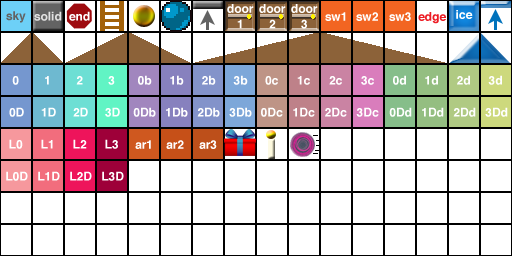
<style>
.page{position:relative;width:512px;height:256px;background:#ffffff}
.page>*{position:absolute;margin:0}
.t1{font:12px "Helvetica-Bold";color:#ffffff}
.t2{font:12px "Helvetica-Bold";color:#636363}
.t3{font:12px "Helvetica-Bold";color:#e1e1e1}
.t4{font:12px "Helvetica-Bold";color:#ed1c24}
</style>
<div class="page">
<p class="t1" style="left:227px;top:4px;width:27px;height:9px">door</p>
<p class="t1" style="left:259px;top:4px;width:27px;height:9px">door</p>
<p class="t1" style="left:291px;top:4px;width:27px;height:9px">door</p>
<p class="t2" style="left:6px;top:11px;width:20px;height:12px">sky</p>
<p class="t3" style="left:34px;top:11px;width:28px;height:10px">solid</p>
<p class="t1" style="left:69px;top:11px;width:21px;height:10px">end</p>
<p class="t1" style="left:325px;top:12px;width:21px;height:9px">sw1</p>
<p class="t1" style="left:356px;top:12px;width:22px;height:9px">sw2</p>
<p class="t1" style="left:389px;top:12px;width:22px;height:9px">sw3</p>
<p class="t4" style="left:418px;top:12px;width:28px;height:12px">edge</p>
<p class="t1" style="left:456px;top:10px;width:17px;height:9px">ice</p>
<p class="t1" style="left:237px;top:19px;width:5px;height:10px">1</p>
<p class="t1" style="left:269px;top:19px;width:7px;height:10px">2</p>
<p class="t1" style="left:301px;top:19px;width:6px;height:10px">3</p>
<p class="t1" style="left:12px;top:76px;width:7px;height:9px">0</p>
<p class="t1" style="left:45px;top:76px;width:4px;height:9px">1</p>
<p class="t1" style="left:76px;top:76px;width:7px;height:9px">2</p>
<p class="t1" style="left:108px;top:76px;width:7px;height:9px">3</p>
<p class="t1" style="left:138px;top:75px;width:14px;height:10px">0b</p>
<p class="t1" style="left:170px;top:75px;width:14px;height:10px">1b</p>
<p class="t1" style="left:202px;top:75px;width:14px;height:10px">2b</p>
<p class="t1" style="left:233px;top:75px;width:15px;height:10px">3b</p>
<p class="t1" style="left:265px;top:76px;width:13px;height:9px">0c</p>
<p class="t1" style="left:297px;top:76px;width:13px;height:9px">1c</p>
<p class="t1" style="left:329px;top:76px;width:13px;height:9px">2c</p>
<p class="t1" style="left:361px;top:76px;width:13px;height:9px">3c</p>
<p class="t1" style="left:393px;top:75px;width:13px;height:10px">0d</p>
<p class="t1" style="left:425px;top:75px;width:13px;height:10px">1d</p>
<p class="t1" style="left:457px;top:75px;width:13px;height:10px">2d</p>
<p class="t1" style="left:488px;top:75px;width:14px;height:10px">3d</p>
<p class="t1" style="left:9px;top:107px;width:15px;height:10px">0D</p>
<p class="t1" style="left:41px;top:107px;width:15px;height:10px">1D</p>
<p class="t1" style="left:73px;top:107px;width:15px;height:10px">2D</p>
<p class="t1" style="left:105px;top:107px;width:15px;height:10px">3D</p>
<p class="t1" style="left:133px;top:107px;width:23px;height:10px">0Db</p>
<p class="t1" style="left:166px;top:107px;width:22px;height:10px">1Db</p>
<p class="t1" style="left:197px;top:107px;width:23px;height:10px">2Db</p>
<p class="t1" style="left:229px;top:107px;width:23px;height:10px">3Db</p>
<p class="t1" style="left:261px;top:107px;width:22px;height:10px">0Dc</p>
<p class="t1" style="left:293px;top:107px;width:22px;height:10px">1Dc</p>
<p class="t1" style="left:325px;top:107px;width:22px;height:10px">2Dc</p>
<p class="t1" style="left:356px;top:107px;width:23px;height:10px">3Dc</p>
<p class="t1" style="left:389px;top:107px;width:23px;height:10px">0Dd</p>
<p class="t1" style="left:422px;top:107px;width:22px;height:10px">1Dd</p>
<p class="t1" style="left:453px;top:107px;width:23px;height:10px">2Dd</p>
<p class="t1" style="left:485px;top:107px;width:23px;height:10px">3Dd</p>
<p class="t1" style="left:9px;top:139px;width:14px;height:10px">L0</p>
<p class="t1" style="left:41px;top:139px;width:12px;height:10px">L1</p>
<p class="t1" style="left:73px;top:139px;width:14px;height:10px">L2</p>
<p class="t1" style="left:105px;top:139px;width:13px;height:10px">L3</p>
<p class="t1" style="left:135px;top:140px;width:16px;height:9px">ar1</p>
<p class="t1" style="left:166px;top:140px;width:18px;height:9px">ar2</p>
<p class="t1" style="left:199px;top:140px;width:18px;height:9px">ar3</p>
<p class="t1" style="left:6px;top:171px;width:22px;height:10px">L0D</p>
<p class="t1" style="left:38px;top:171px;width:22px;height:10px">L1D</p>
<p class="t1" style="left:70px;top:171px;width:22px;height:10px">L2D</p>
<p class="t1" style="left:102px;top:171px;width:22px;height:10px">L3D</p>
</div>
